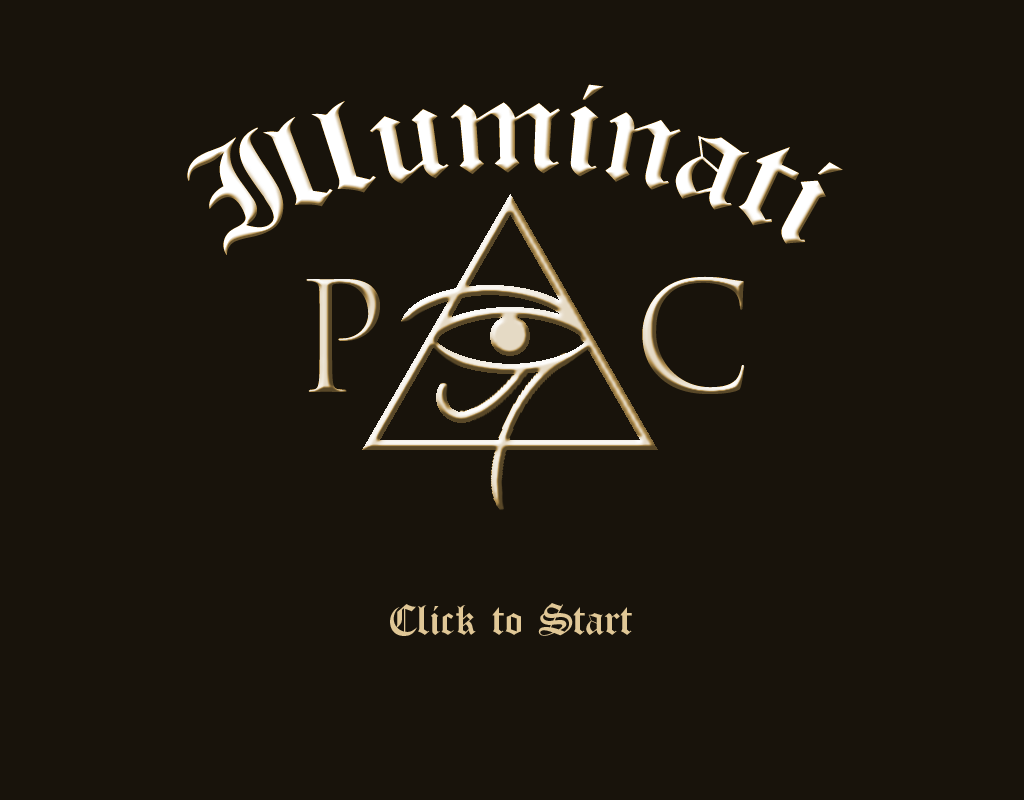
<style>
.page{position:relative;width:1024px;height:800px;background:#18130b}
.page>*{position:absolute;margin:0}
.t1{font:148px "OldLondon";color:#ffffff}
.t2{font:48px "OldLondon";color:#e0c796}
</style>
<div class="page">
<p class="t1" style="left:187px;top:84px;width:656px;height:171px">Illuminati</p>
<p class="t2" style="left:390px;top:603px;width:242px;height:33px">Click to Start</p>
</div>
